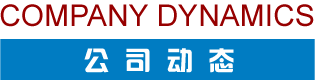
<style>
.page{position:relative;width:315px;height:80px;background:#007cc2}
.page>*{position:absolute;margin:0}
.t1{font:30px "ArialMT";color:#960000;text-transform:uppercase}
.t2{font:26px "hzgb";letter-spacing:0.6em;color:#fefefe;text-transform:uppercase}
</style>
<div class="page">
<p class="t1" style="left:0px;top:4px;width:314px;height:23px">Company dynamics</p>
<p class="t2" style="left:84px;top:48px;width:150px;height:25px">公司动态</p>
</div>
